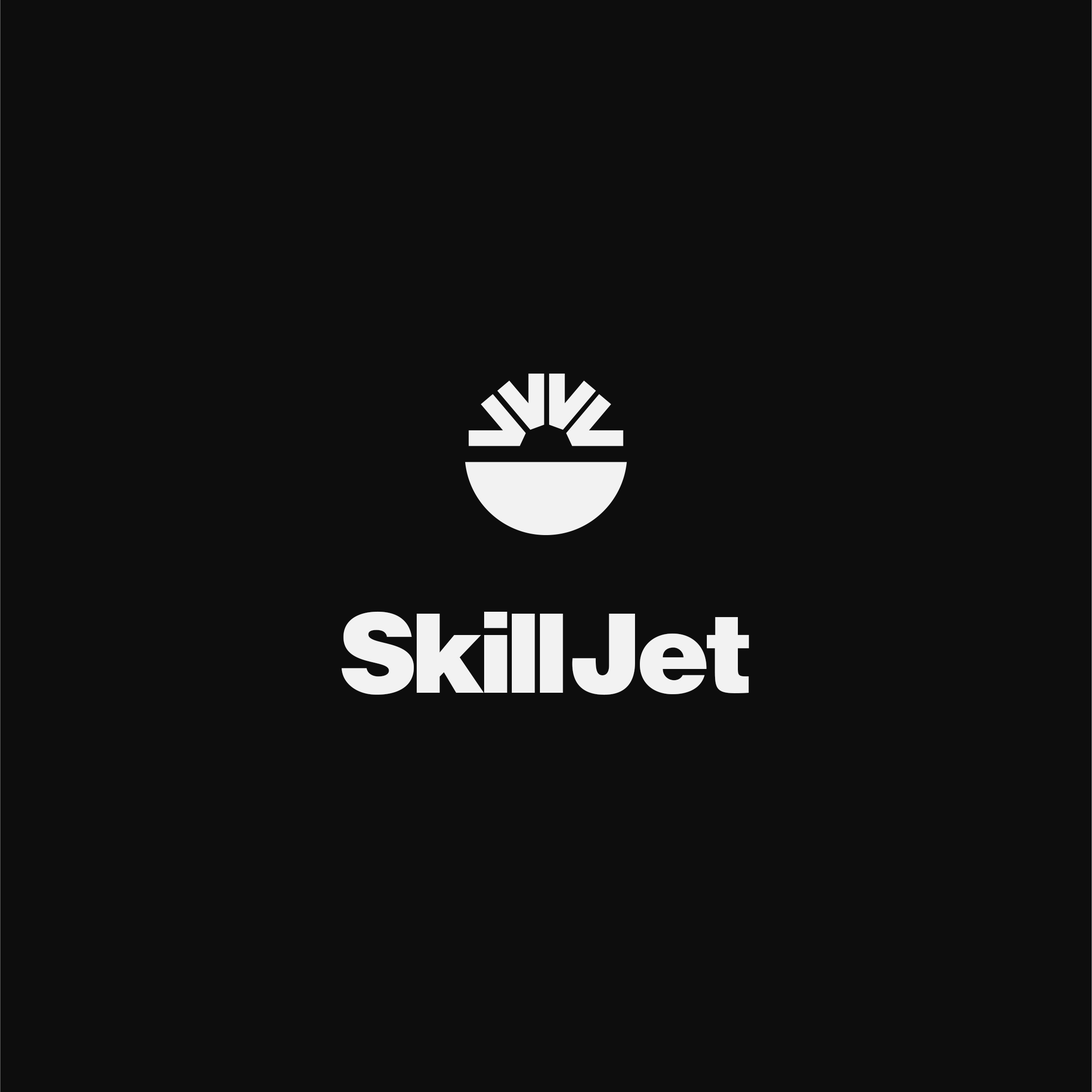
<style>
.page{position:relative;width:1092px;height:1092px;background:#0d0d0d}
.page>*{position:absolute;margin:0}
.t1{font:109.9px "Helvetica-Black";color:#f2f2f2}
</style>
<div class="page">
<p class="t1" style="left:342px;top:611px;width:407px;height:84px">SkillJet</p>
</div>
